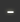
<style>
.page{position:relative;width:20px;height:22px;background:#333333}
.page>*{position:absolute;margin:0}
.t1{font:22px "Raavi";color:#ffffff}
</style>
<div class="page">
<p class="t1" style="left:7px;top:11px;width:7px;height:2px">-</p>
</div>
